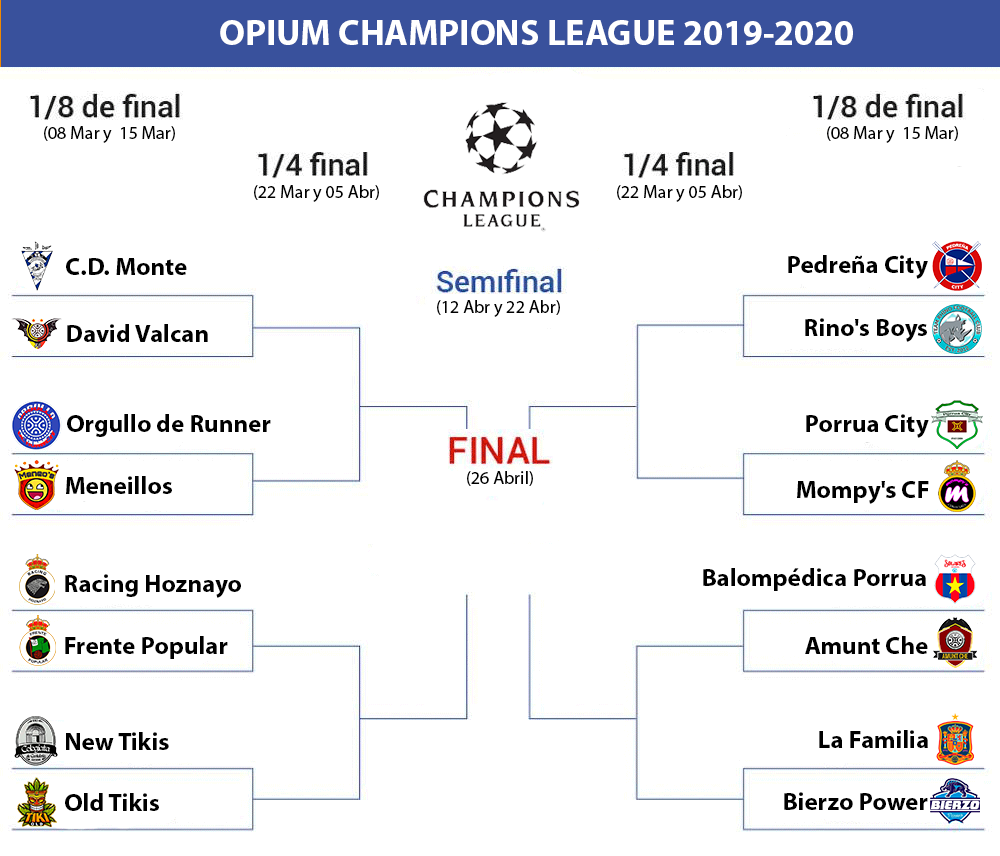
<style>
.page{position:relative;width:1000px;height:856px;background:#ffffff}
.page>*{position:absolute;margin:0}
.t1{font:36px "MyriadPro-Bold";color:#ffffff}
.t2{font:18px "MyriadPro-Regular";color:#000000}
.t3{font:25px "MyriadPro-Bold";color:#000000}
</style>
<div class="page">
<p class="t1" style="left:220px;top:20px;width:633px;height:25px">OPIUM CHAMPIONS LEAGUE 2019-2020</p>
<p class="t2" style="left:44px;top:126px;width:131px;height:17px">(08 Mar y  15 Mar)</p>
<p class="t2" style="left:827px;top:126px;width:131px;height:17px">(08 Mar y  15 Mar)</p>
<p class="t2" style="left:254px;top:185px;width:125px;height:17px">(22 Mar y 05 Abr)</p>
<p class="t2" style="left:617px;top:185px;width:125px;height:17px">(22 Mar y 05 Abr)</p>
<p class="t3" style="left:788px;top:255px;width:140px;height:24px">Pedreña City</p>
<p class="t3" style="left:66px;top:258px;width:121px;height:17px">C.D. Monte</p>
<p class="t2" style="left:437px;top:300px;width:123px;height:17px">(12 Abr y 22 Abr)</p>
<p class="t3" style="left:805px;top:318px;width:122px;height:24px">Rino's Boys</p>
<p class="t3" style="left:67px;top:324px;width:141px;height:18px">David Valcan</p>
<p class="t3" style="left:67px;top:414px;width:204px;height:23px">Orgullo de Runner</p>
<p class="t3" style="left:806px;top:414px;width:123px;height:24px">Porrua City</p>
<p class="t2" style="left:467px;top:471px;width:66px;height:15px">(26 Abril)</p>
<p class="t3" style="left:66px;top:476px;width:106px;height:18px">Meneillos</p>
<p class="t3" style="left:797px;top:481px;width:132px;height:23px">Mompy's CF</p>
<p class="t3" style="left:703px;top:568px;width:223px;height:23px">Balompédica Porrua</p>
<p class="t3" style="left:65px;top:574px;width:176px;height:24px">Racing Hoznayo</p>
<p class="t3" style="left:65px;top:636px;width:163px;height:23px">Frente Popular</p>
<p class="t3" style="left:805px;top:636px;width:123px;height:18px">Amunt Che</p>
<p class="t3" style="left:66px;top:732px;width:103px;height:18px">New Tikis</p>
<p class="t3" style="left:819px;top:730px;width:109px;height:18px">La Familia</p>
<p class="t3" style="left:65px;top:793px;width:94px;height:18px">Old Tikis</p>
<p class="t3" style="left:784px;top:792px;width:144px;height:18px">Bierzo Power</p>
</div>
